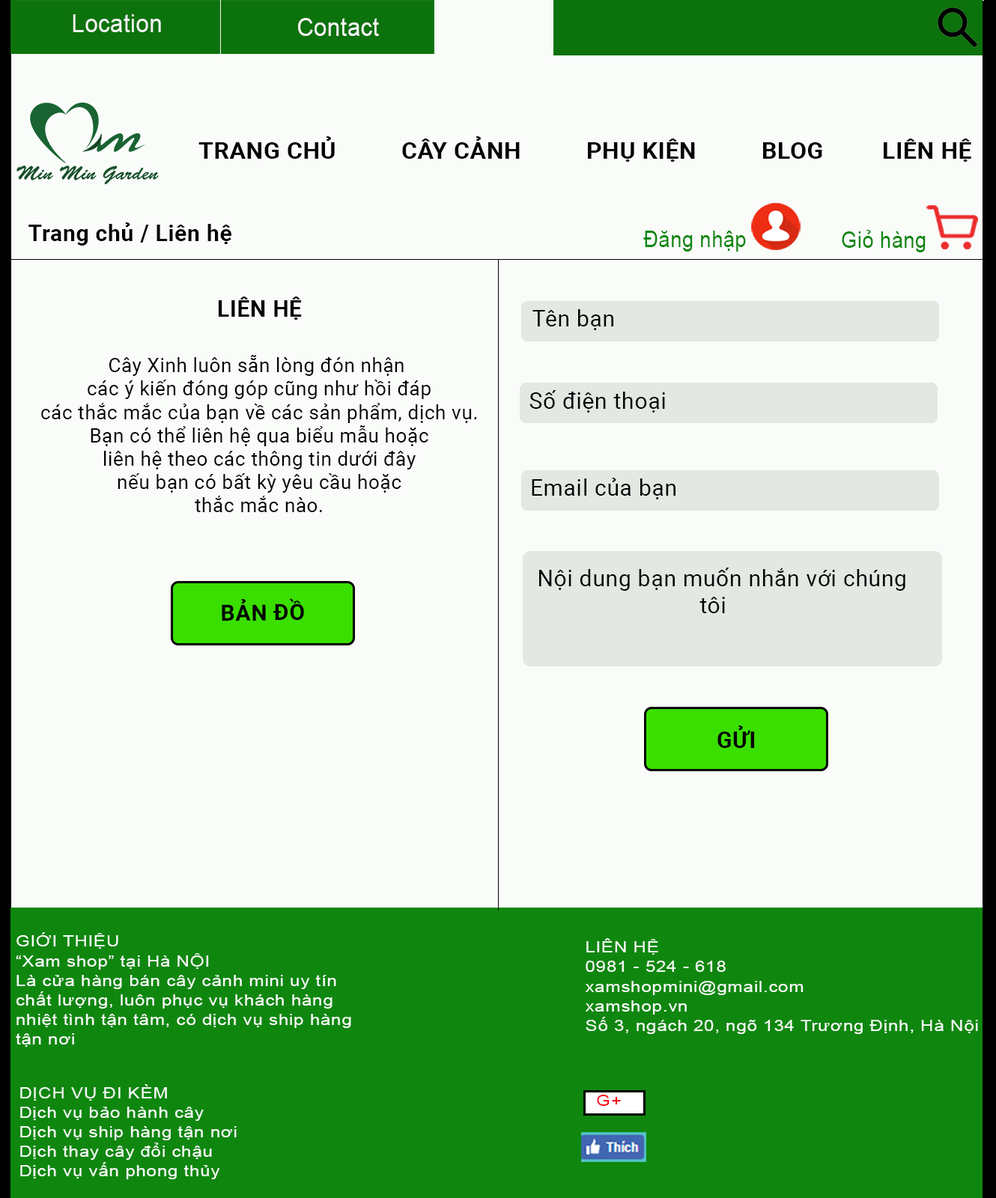
<style>
.page{position:relative;width:996px;height:1198px;background:#fafcfa}
.page>*{position:absolute;margin:0}
.t1{font:25px "ArialMT";letter-spacing:0.025em;color:#f0f3f0;scale:0.92 1}
.t2{font:25px "ArialMT";letter-spacing:0.025em;color:#fbf7f7;scale:0.92 1}
.t3{font:22.5px "Roboto-Bold";letter-spacing:0.025em;color:#050505;text-transform:uppercase;scale:1.06 1}
.t4{font:22.5px "Roboto-Bold";letter-spacing:0.025em;color:#040404}
.t5{font:23.1px "ArialMT";letter-spacing:0.025em;color:#0f870f;scale:0.87 1}
.t6{font:22.5px "Roboto-Regular";letter-spacing:0.025em;color:#040404}
.t7{font:19.5px "Roboto-Regular";letter-spacing:0.025em;color:#040404}
.t8{font:22.5px "TimesNewRomanPS-BoldMT";letter-spacing:0.025em;color:#040404}
.t9{font:15.6px/19.5px "ArialMT";letter-spacing:0.025em;color:#f4fbf4;scale:1.17 1}
.t10{font:15.6px "ArialMT";letter-spacing:0.025em;color:#f60b1b;scale:1.17 1}
</style>
<div class="page">
<p class="t1" style="left:73px;top:14px;width:88px;height:18px">Location</p>
<p class="t2" style="left:298px;top:18px;width:81px;height:18px">Contact</p>
<p class="t3" style="left:198px;top:136px;width:773px;height:26px">Trang chủ          Cây cảnh          Phụ kiện          Blog         Liên hệ</p>
<p class="t4" style="left:28px;top:222px;width:203px;height:24px">Trang chủ / Liên hệ</p>
<p class="t5" style="left:643px;top:231px;width:103px;height:21px">Đăng nhập</p>
<p class="t5" style="left:841px;top:230px;width:84px;height:22px">Giỏ hàng</p>
<p class="t4" style="left:218px;top:296px;width:84px;height:24px">LIÊN HỆ</p>
<p class="t6" style="left:532px;top:309px;width:81px;height:21px">Tên bạn</p>
<p class="t7" style="left:41px;top:355px;width:436px;height:157px"><span class="t8"><br><br></span>Cây Xinh luôn sẵn lòng đón nhận <br>các ý kiến đóng góp cũng như hồi đáp<br>các thắc mắc của bạn về các sản phẩm, dịch vụ.<br> Bạn có thể liên hệ qua biểu mẫu hoặc <br>liên hệ theo các thông tin dưới đây<br> nếu bạn có bất kỳ yêu cầu hoặc <br>thắc mắc nào.</p>
<p class="t6" style="left:529px;top:390px;width:136px;height:22px">Số điện thoại</p>
<p class="t6" style="left:531px;top:478px;width:144px;height:21px">Email của bạn</p>
<p class="t6" style="left:539px;top:567px;width:366px;height:46px;text-align:center">Nội dung bạn muốn nhắn với chúng tôi</p>
<p class="t4" style="left:222px;top:598px;width:82px;height:23px;rotate:-1deg">BẢN ĐỒ</p>
<p class="t4" style="left:717px;top:725px;width:38px;height:23px">GỬI</p>
<p class="t9" style="left:16px;top:932px;width:335px;height:114px">GIỚI THIỆU<br>“Xam shop” tại Hà NỘI<br>Là cửa hàng bán cây cảnh mini uy tín<br>chất lượng, luôn phục vụ khách hàng <br>nhiệt tình tận tâm, có dịch vụ ship hàng <br>tận nơi</p>
<p class="t9" style="left:585px;top:938px;width:393px;height:96px">LIÊN HỆ<br>0981 - 524 - 618<br>xamshopmini@gmail.com<br>xamshop.vn<br>Số 3, ngách 20, ngõ 134 Trương Định, Hà Nội</p>
<p class="t9" style="left:20px;top:1084px;width:217px;height:95px">DỊCH VỤ ĐI KÈM<br>Dịch vụ bảo hành cây<br>Dịch vụ ship hàng tận nơi<br>Dịch thay cây đổi chậu<br>Dịch vụ vấn phong thủy</p>
<p class="t10" style="left:597px;top:1094px;width:24px;height:12px">G+</p>
</div>
